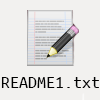
<style>
.page{position:relative;width:100px;height:100px;background:#f2f1ef}
.page>*{position:absolute;margin:0}
.t1{font:18px "UbuntuMono-Regular";color:#010101}
</style>
<div class="page">
<p class="t1" style="left:1px;top:77px;width:98px;height:11px">README1.txt</p>
</div>
